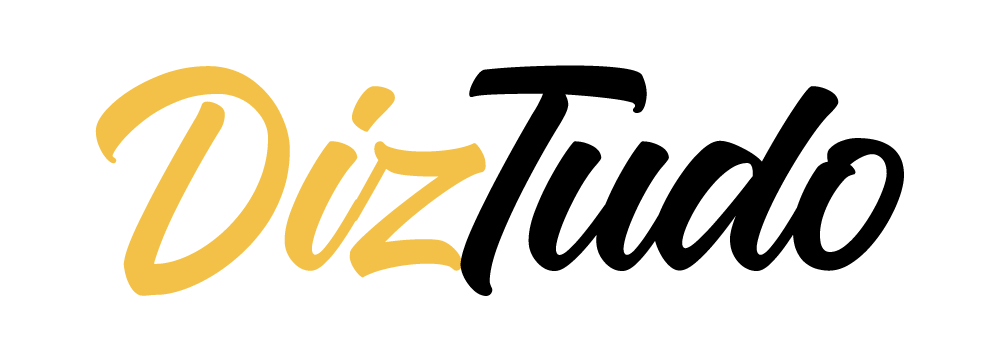
<style>
.page{position:relative;width:1000px;height:360px;background:#ffffff}
.page>*{position:absolute;margin:0}
.t1{font:259.8px "SrabiScript";color:#000000}
.t2{font:259.8px "SrabiScript";color:#f3c147}
</style>
<div class="page">
<p class="t1" style="left:95px;top:65px;width:809px;height:231px"><span class="t2">Diz</span>Tudo</p>
</div>
